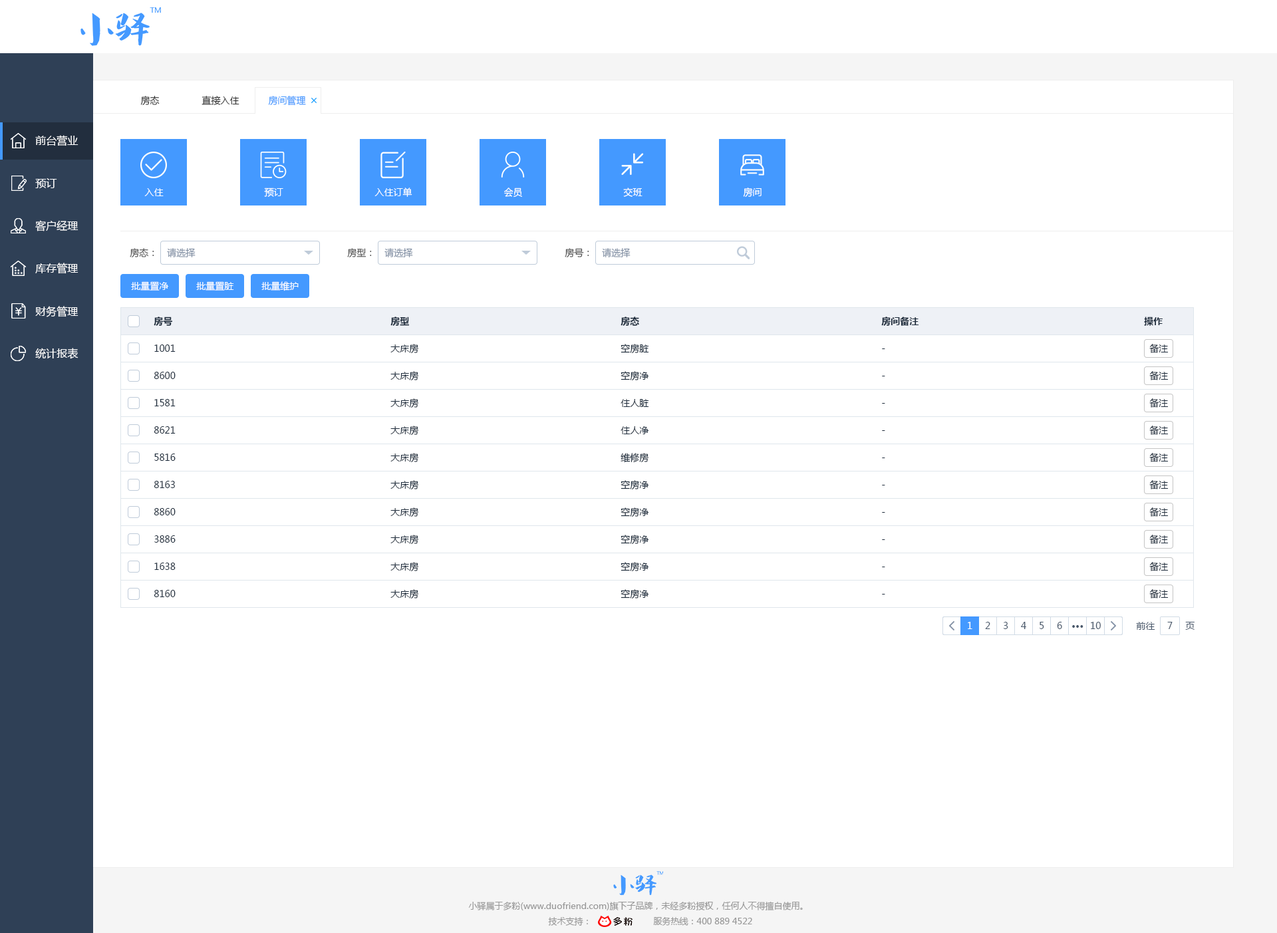
<style>
.page{position:relative;width:1277px;height:933px;background:#ffffff}
.page>*{position:absolute;margin:0}
.t1{font:9.3px "MicrosoftYaHei";color:#333333}
.t2{font:9.3px "MicrosoftYaHei";color:#4499ff}
.t3{font:10.6px "MicrosoftYaHei";color:#ffffff}
.t4{font:9.3px "MicrosoftYaHei";color:#ffffff}
.t5{font:9.3px "MicrosoftYaHei";color:#505050}
.t6{font:9.3px "MicrosoftYaHei";color:#8391a5}
.t7{font:9.3px "MicrosoftYaHei-Bold";color:#1f2d3d}
.t8{font:9.3px "MicrosoftYaHei";color:#1f2d3d}
.t9{font:9.3px "MicrosoftYaHei";color:#48576a}
.t10{font:9.3px "MicrosoftYaHei-Bold";color:#48576a}
.t11{font:8.6px "MicrosoftYaHei";color:#999999}
</style>
<div class="page">
<p class="t1" style="left:140px;top:96px;width:20px;height:9px">房态</p>
<p class="t1" style="left:202px;top:96px;width:38px;height:9px">直接入住</p>
<p class="t2" style="left:268px;top:96px;width:38px;height:10px">房间管理</p>
<p class="t3" style="left:35px;top:135px;width:44px;height:11px">前台营业</p>
<p class="t3" style="left:35px;top:178px;width:22px;height:10px">预订</p>
<p class="t4" style="left:144px;top:188px;width:20px;height:8px">入住</p>
<p class="t4" style="left:264px;top:188px;width:19px;height:9px">预订</p>
<p class="t4" style="left:375px;top:188px;width:38px;height:9px">入住订单</p>
<p class="t4" style="left:504px;top:188px;width:18px;height:10px">会员</p>
<p class="t4" style="left:623px;top:188px;width:20px;height:9px">交班</p>
<p class="t4" style="left:743px;top:188px;width:19px;height:9px">房间</p>
<p class="t3" style="left:35px;top:220px;width:44px;height:12px">客户经理</p>
<p class="t5" style="left:130px;top:248px;width:24px;height:10px">房态：</p>
<p class="t6" style="left:167px;top:248px;width:29px;height:9px">请选择</p>
<p class="t5" style="left:347px;top:248px;width:25px;height:10px">房型：</p>
<p class="t6" style="left:385px;top:248px;width:28px;height:9px">请选择</p>
<p class="t5" style="left:565px;top:248px;width:24px;height:10px">房号：</p>
<p class="t6" style="left:602px;top:248px;width:29px;height:9px">请选择</p>
<p class="t3" style="left:35px;top:263px;width:44px;height:11px">库存管理</p>
<p class="t4" style="left:131px;top:281px;width:38px;height:10px">批量置净</p>
<p class="t4" style="left:196px;top:281px;width:38px;height:10px">批量置脏</p>
<p class="t4" style="left:261px;top:281px;width:38px;height:10px">批量维护</p>
<p class="t3" style="left:35px;top:306px;width:44px;height:11px">财务管理</p>
<p class="t7" style="left:154px;top:317px;width:18px;height:9px">房号</p>
<p class="t7" style="left:391px;top:317px;width:18px;height:9px">房型</p>
<p class="t7" style="left:621px;top:317px;width:18px;height:9px">房态</p>
<p class="t7" style="left:882px;top:317px;width:37px;height:9px">房间备注</p>
<p class="t7" style="left:1144px;top:317px;width:19px;height:9px">操作</p>
<p class="t3" style="left:35px;top:348px;width:44px;height:11px">统计报表</p>
<p class="t8" style="left:154px;top:345px;width:22px;height:7px">1001</p>
<p class="t8" style="left:391px;top:344px;width:28px;height:10px">大床房</p>
<p class="t8" style="left:621px;top:344px;width:28px;height:10px">空房脏</p>
<p class="t8" style="left:882px;top:349px;width:4px;height:0px">-</p>
<p class="t8" style="left:1150px;top:344px;width:19px;height:9px">备注</p>
<p class="t8" style="left:154px;top:372px;width:22px;height:7px">8600</p>
<p class="t8" style="left:391px;top:371px;width:28px;height:10px">大床房</p>
<p class="t8" style="left:621px;top:371px;width:28px;height:10px">空房净</p>
<p class="t8" style="left:882px;top:376px;width:4px;height:1px">-</p>
<p class="t8" style="left:1150px;top:371px;width:19px;height:10px">备注</p>
<p class="t8" style="left:154px;top:399px;width:22px;height:8px">1581</p>
<p class="t8" style="left:391px;top:399px;width:28px;height:10px">大床房</p>
<p class="t8" style="left:621px;top:399px;width:28px;height:8px">住人脏</p>
<p class="t8" style="left:1150px;top:399px;width:19px;height:9px">备注</p>
<p class="t8" style="left:882px;top:403px;width:4px;height:1px">-</p>
<p class="t8" style="left:391px;top:426px;width:28px;height:10px">大床房</p>
<p class="t8" style="left:1150px;top:426px;width:19px;height:9px">备注</p>
<p class="t8" style="left:154px;top:426px;width:22px;height:8px">8621</p>
<p class="t8" style="left:621px;top:426px;width:28px;height:8px">住人净</p>
<p class="t8" style="left:882px;top:430px;width:4px;height:1px">-</p>
<p class="t8" style="left:154px;top:454px;width:22px;height:7px">5816</p>
<p class="t8" style="left:391px;top:453px;width:28px;height:10px">大床房</p>
<p class="t8" style="left:621px;top:453px;width:28px;height:10px">维修房</p>
<p class="t8" style="left:882px;top:458px;width:4px;height:0px">-</p>
<p class="t8" style="left:1150px;top:453px;width:19px;height:9px">备注</p>
<p class="t8" style="left:154px;top:481px;width:21px;height:7px">8163</p>
<p class="t8" style="left:391px;top:480px;width:28px;height:10px">大床房</p>
<p class="t8" style="left:621px;top:480px;width:28px;height:10px">空房净</p>
<p class="t8" style="left:882px;top:485px;width:4px;height:1px">-</p>
<p class="t8" style="left:1150px;top:480px;width:19px;height:10px">备注</p>
<p class="t8" style="left:154px;top:508px;width:22px;height:8px">8860</p>
<p class="t8" style="left:391px;top:508px;width:28px;height:10px">大床房</p>
<p class="t8" style="left:621px;top:508px;width:28px;height:10px">空房净</p>
<p class="t8" style="left:1150px;top:508px;width:19px;height:9px">备注</p>
<p class="t8" style="left:882px;top:512px;width:4px;height:1px">-</p>
<p class="t8" style="left:154px;top:536px;width:22px;height:7px">3886</p>
<p class="t8" style="left:391px;top:535px;width:28px;height:10px">大床房</p>
<p class="t8" style="left:621px;top:535px;width:28px;height:10px">空房净</p>
<p class="t8" style="left:882px;top:540px;width:4px;height:0px">-</p>
<p class="t8" style="left:1150px;top:535px;width:19px;height:9px">备注</p>
<p class="t8" style="left:154px;top:563px;width:22px;height:7px">1638</p>
<p class="t8" style="left:391px;top:562px;width:28px;height:10px">大床房</p>
<p class="t8" style="left:621px;top:562px;width:28px;height:10px">空房净</p>
<p class="t8" style="left:882px;top:567px;width:4px;height:1px">-</p>
<p class="t8" style="left:1150px;top:562px;width:19px;height:10px">备注</p>
<p class="t8" style="left:154px;top:590px;width:22px;height:7px">8160</p>
<p class="t8" style="left:391px;top:589px;width:28px;height:10px">大床房</p>
<p class="t8" style="left:621px;top:589px;width:28px;height:10px">空房净</p>
<p class="t8" style="left:1150px;top:589px;width:19px;height:10px">备注</p>
<p class="t8" style="left:882px;top:594px;width:4px;height:1px">-</p>
<p class="t4" style="left:968px;top:622px;width:5px;height:7px">1</p>
<p class="t9" style="left:985px;top:622px;width:6px;height:7px">2</p>
<p class="t9" style="left:1003px;top:622px;width:6px;height:7px">3</p>
<p class="t9" style="left:1021px;top:622px;width:6px;height:7px">4</p>
<p class="t9" style="left:1040px;top:622px;width:5px;height:7px">5</p>
<p class="t9" style="left:1057px;top:622px;width:6px;height:7px">6</p>
<p class="t10" style="left:1073px;top:625px;width:11px;height:3px">···</p>
<p class="t9" style="left:1091px;top:622px;width:10px;height:7px">10</p>
<p class="t9" style="left:1136px;top:622px;width:20px;height:8px">前往</p>
<p class="t9" style="left:1168px;top:622px;width:5px;height:7px">7</p>
<p class="t9" style="left:1186px;top:622px;width:9px;height:8px">页</p>
<p class="t11" style="left:468px;top:902px;width:335px;height:9px">小驿属于多粉(www.duofriend.com)旗下子品牌，未经多粉授权，任何人不得擅自使用。</p>
<p class="t11" style="left:548px;top:917px;width:40px;height:9px">技术支持：</p>
<p class="t11" style="left:653px;top:917px;width:99px;height:9px">服务热线：400 889 4522</p>
</div>
